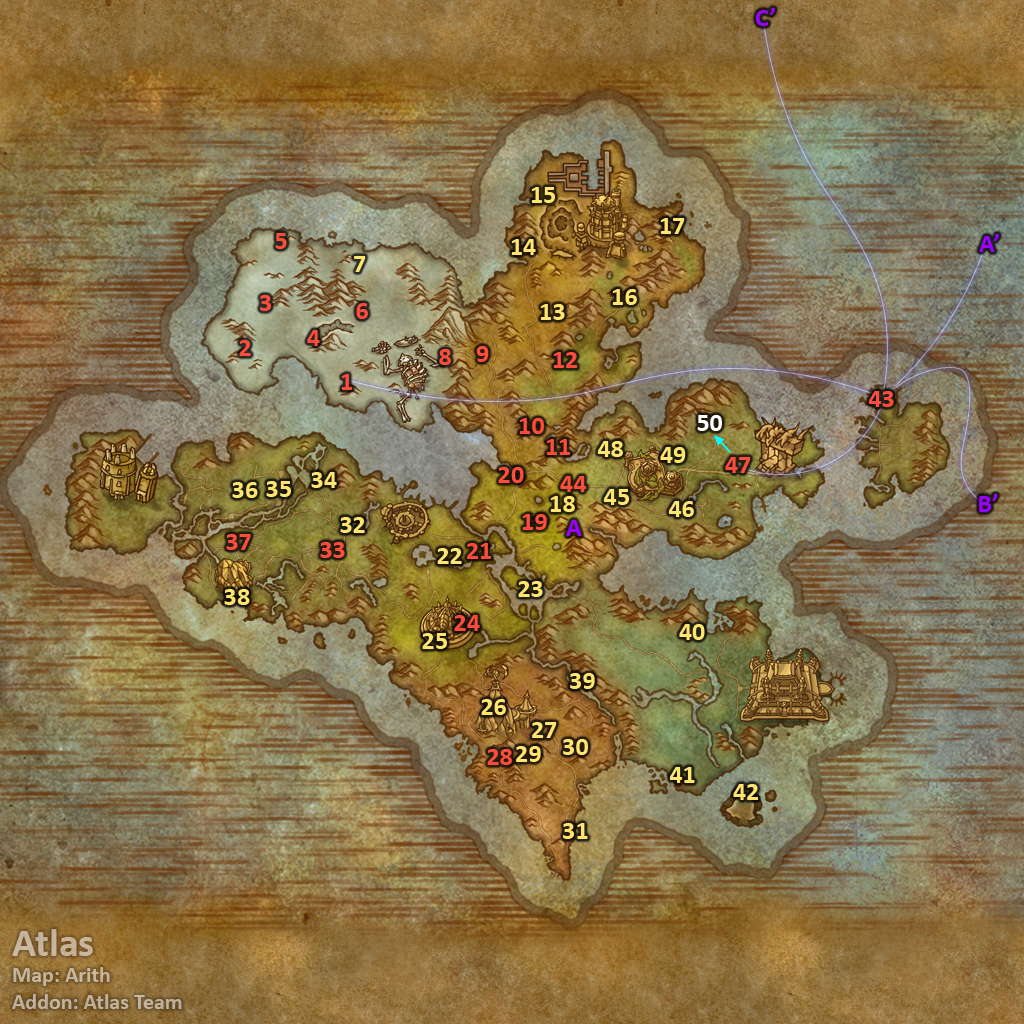
<style>
.page{position:relative;width:1024px;height:1024px}
.page>*{position:absolute;margin:0}
.t1{font:26px "Calibri-Bold";color:#9900ff}
.t2{font:26px "Calibri-Bold";color:#fee570}
.t3{font:26px "Calibri-Bold";color:#ff4c3c}
.t4{font:26px "Calibri-Bold";color:#ffffff}
.t5{font:22px "Calibri-Bold";color:#c4b39b}
.t6{font:40px "Calibri-Bold";color:#c4b39b}
</style>
<div class="page">
<p class="t1" style="left:756px;top:8px;width:19px;height:18px">C’</p>
<p class="t2" style="left:531px;top:187px;width:24px;height:16px">15</p>
<p class="t2" style="left:660px;top:218px;width:25px;height:16px">17</p>
<p class="t3" style="left:275px;top:233px;width:12px;height:16px">5</p>
<p class="t2" style="left:511px;top:239px;width:25px;height:16px">14</p>
<p class="t1" style="left:979px;top:234px;width:20px;height:18px">A’</p>
<p class="t2" style="left:354px;top:256px;width:12px;height:16px">7</p>
<p class="t2" style="left:612px;top:289px;width:25px;height:16px">16</p>
<p class="t3" style="left:260px;top:295px;width:11px;height:16px">3</p>
<p class="t3" style="left:356px;top:303px;width:12px;height:16px">6</p>
<p class="t2" style="left:540px;top:304px;width:25px;height:16px">13</p>
<p class="t3" style="left:239px;top:340px;width:12px;height:16px">2</p>
<p class="t3" style="left:307px;top:330px;width:13px;height:16px">4</p>
<p class="t3" style="left:439px;top:349px;width:12px;height:16px">8</p>
<p class="t3" style="left:476px;top:346px;width:13px;height:16px">9</p>
<p class="t3" style="left:553px;top:352px;width:25px;height:16px">12</p>
<p class="t3" style="left:341px;top:374px;width:11px;height:16px">1</p>
<p class="t3" style="left:868px;top:391px;width:26px;height:16px">43</p>
<p class="t3" style="left:519px;top:418px;width:25px;height:16px">10</p>
<p class="t4" style="left:697px;top:415px;width:25px;height:16px">50</p>
<p class="t3" style="left:546px;top:439px;width:24px;height:16px">11</p>
<p class="t2" style="left:597px;top:441px;width:26px;height:16px">48</p>
<p class="t2" style="left:660px;top:447px;width:26px;height:16px">49</p>
<p class="t3" style="left:725px;top:457px;width:26px;height:16px">47</p>
<p class="t2" style="left:311px;top:472px;width:26px;height:16px">34</p>
<p class="t3" style="left:498px;top:467px;width:26px;height:16px">20</p>
<p class="t2" style="left:232px;top:482px;width:26px;height:16px">36</p>
<p class="t2" style="left:266px;top:481px;width:25px;height:16px">35</p>
<p class="t3" style="left:560px;top:476px;width:27px;height:16px">44</p>
<p class="t2" style="left:550px;top:496px;width:25px;height:16px">18</p>
<p class="t2" style="left:603px;top:489px;width:26px;height:16px">45</p>
<p class="t1" style="left:979px;top:494px;width:19px;height:18px">B’</p>
<p class="t2" style="left:668px;top:501px;width:26px;height:16px">46</p>
<p class="t2" style="left:340px;top:517px;width:25px;height:16px">32</p>
<p class="t3" style="left:522px;top:514px;width:25px;height:16px">19</p>
<p class="t1" style="left:566px;top:520px;width:16px;height:16px">A</p>
<p class="t3" style="left:226px;top:534px;width:25px;height:16px">37</p>
<p class="t3" style="left:320px;top:542px;width:25px;height:16px">33</p>
<p class="t3" style="left:467px;top:543px;width:24px;height:16px">21</p>
<p class="t2" style="left:437px;top:548px;width:25px;height:16px">22</p>
<p class="t2" style="left:518px;top:581px;width:25px;height:16px">23</p>
<p class="t2" style="left:224px;top:589px;width:26px;height:16px">38</p>
<p class="t3" style="left:454px;top:615px;width:26px;height:16px">24</p>
<p class="t2" style="left:679px;top:624px;width:26px;height:16px">40</p>
<p class="t2" style="left:422px;top:633px;width:25px;height:16px">25</p>
<p class="t2" style="left:570px;top:673px;width:25px;height:16px">39</p>
<p class="t2" style="left:481px;top:699px;width:25px;height:16px">26</p>
<p class="t2" style="left:532px;top:722px;width:25px;height:16px">27</p>
<p class="t3" style="left:487px;top:749px;width:25px;height:16px">28</p>
<p class="t2" style="left:516px;top:746px;width:25px;height:16px">29</p>
<p class="t2" style="left:563px;top:739px;width:25px;height:16px">30</p>
<p class="t2" style="left:669px;top:767px;width:26px;height:16px">41</p>
<p class="t2" style="left:733px;top:784px;width:26px;height:16px">42</p>
<p class="t2" style="left:563px;top:823px;width:25px;height:16px">31</p>
<p class="t5" style="left:12px;top:929px;width:170px;height:80px"><span class="t6">Atlas<br></span>Map: Arith<br>Addon: Atlas Team</p>
</div>
